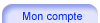
<style>
.page{position:relative;width:100px;height:23px;background:#e1e4fc}
.page>*{position:absolute;margin:0}
.t1{font:11px "ArialMT";color:#092ff6}
</style>
<div class="page">
<p class="t1" style="left:23px;top:12px;width:59px;height:11px">Mon compte</p>
</div>
